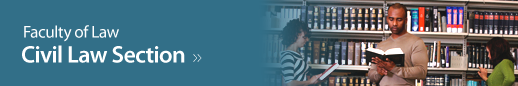
<style>
.page{position:relative;width:518px;height:86px;background:#326f88}
.page>*{position:absolute;margin:0}
.t1{font:17px "MyriadPro-Regular";letter-spacing:-0.02em;color:#ffffff}
.t2{font:24px "MyriadPro-Semibold";letter-spacing:-0.025em;color:#ffffff}
.t3{font:15px "MyriadPro-Regular";letter-spacing:-0.015em;scale:0.5 1}
</style>
<div class="page">
<p class="t1" style="left:24px;top:25px;width:95px;height:17px">Faculty of Law</p>
<p class="t2" style="left:22px;top:45px;width:163px;height:18px">Civil Law Section</p>
<p class="t3" style="left:193px;top:54px;width:9px;height:8px">&gt;&gt;</p>
</div>
